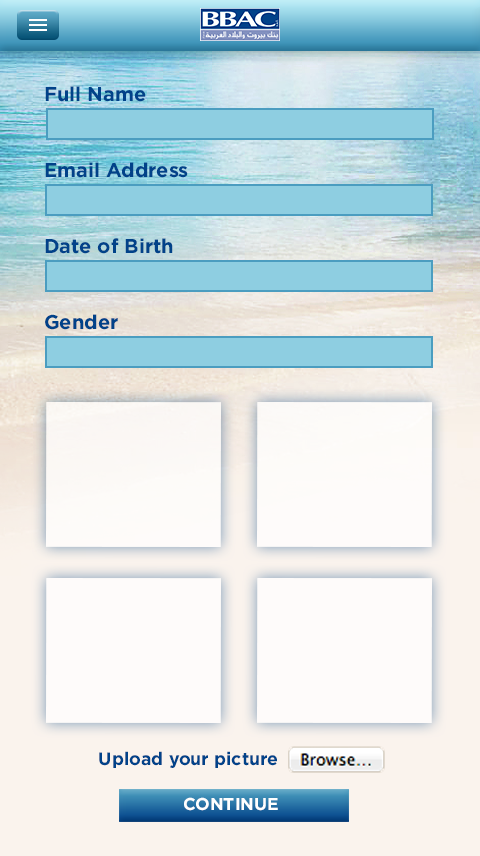
<style>
.page{position:relative;width:480px;height:856px}
.page>*{position:absolute;margin:0}
.t1{font:20px/38px "Gotham-Bold";color:#014289}
.t2{font:18px "Gotham-Bold";color:#014289}
.t3{font:17.2px "Gotham-Bold";color:#ffffff}
</style>
<div class="page">
<p class="t1" style="left:45px;top:86px;width:143px;height:244px">Full Name<br><br>Email Address<br><br>Date of Birth<br><br>Gender</p>
<p class="t2" style="left:99px;top:751px;width:178px;height:17px">Upload your picture</p>
<p class="t3" style="left:184px;top:797px;width:94px;height:14px">CONTINUE</p>
</div>
